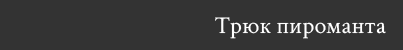
<style>
.page{position:relative;width:403px;height:50px;background:#333333}
.page>*{position:absolute;margin:0}
.t1{font:24px "CrimsonText-Regular";color:#ffffff}
</style>
<div class="page">
<p class="t1" style="left:215px;top:17px;width:171px;height:22px">Трюк пироманта</p>
</div>
